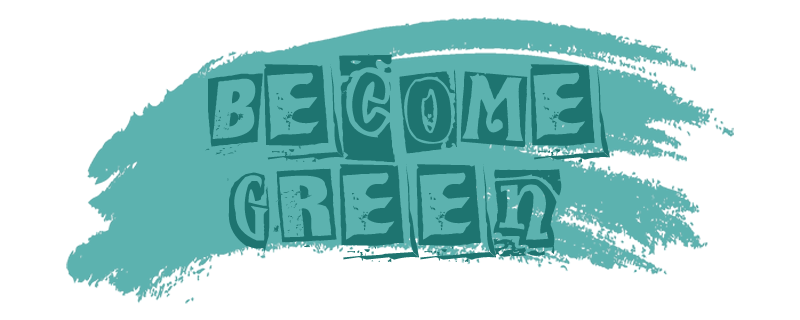
<style>
.page{position:relative;width:800px;height:320px;background:#ffffff}
.page>*{position:absolute;margin:0}
.t1{font:100px "KingthingsExtortion";color:#1e7470}
</style>
<div class="page">
<p class="t1" style="left:205px;top:54px;width:405px;height:109px">Become</p>
<p class="t1" style="left:227px;top:164px;width:335px;height:99px">Green</p>
</div>
